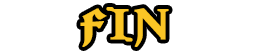
<style>
.page{position:relative;width:260px;height:52px;background:#ffffff}
.page>*{position:absolute;margin:0}
.t1{font:39.9px "Vinque-Regular";color:#fac525;font-weight:bold;scale:1.16 1}
</style>
<div class="page">
<p class="t1" style="left:80px;top:7px;width:89px;height:40px">FIN</p>
</div>
